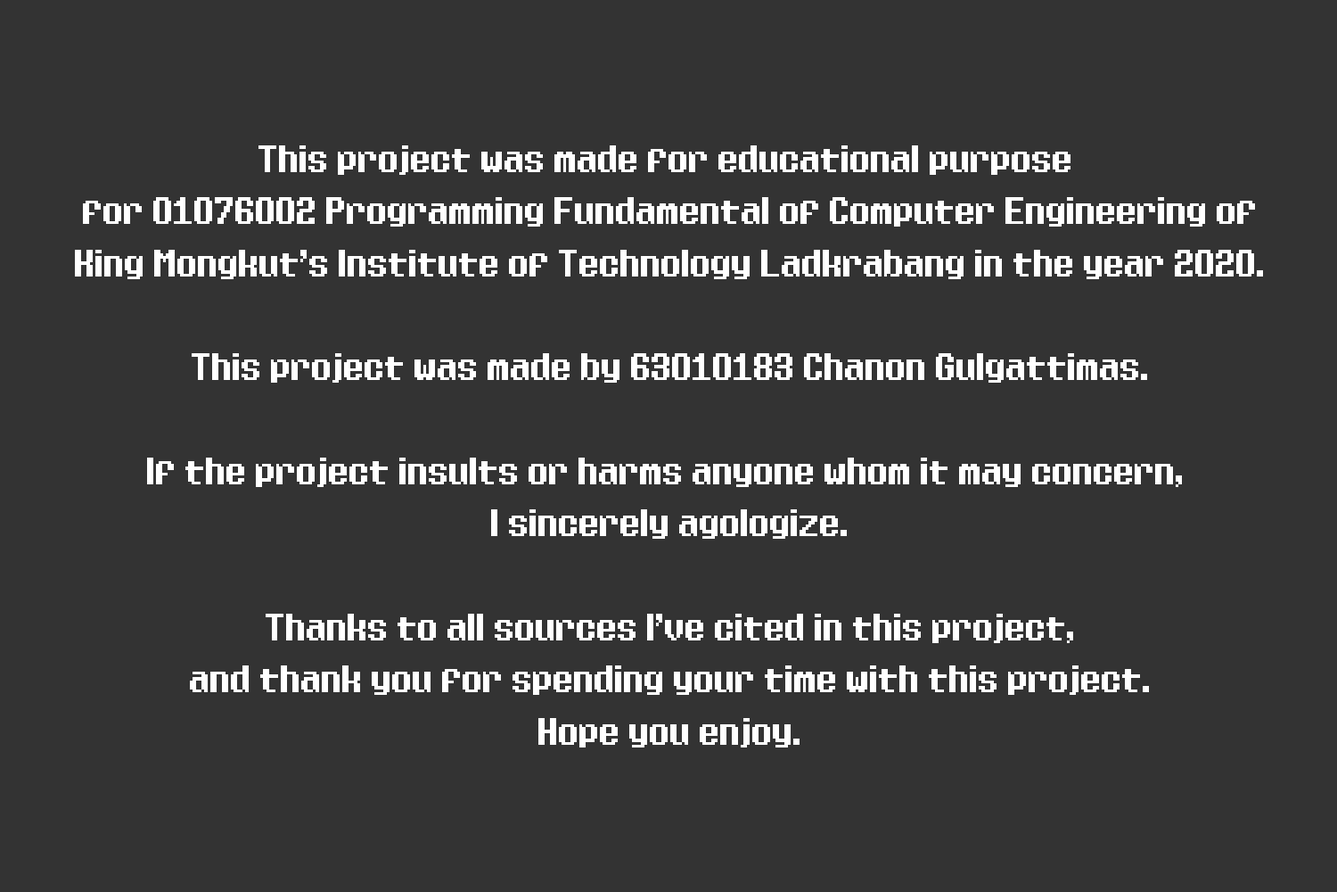
<style>
.page{position:relative;width:1337px;height:892px;background:#333333}
.page>*{position:absolute;margin:0}
.t1{font:29.7px/52px "Eight-Bit-Dragon";color:#ffffff}
</style>
<div class="page">
<p class="t1" style="left:75px;top:145px;width:1188px;height:602px;text-align:center">This project was made for educational purpose <br>for 01076002 Programming Fundamental of Computer Engineering of<br>King Mongkut's Institute of Technology Ladkrabang in the year 2020.<br><br>This project was made by 63010183 Chanon Gulgattimas.<br><br>If the project insults or harms anyone whom it may concern, <br>I sincerely agologize.<br><br>Thanks to all sources I’ve cited in this project,<br>and thank you for spending your time with this project.<br>Hope you enjoy.</p>
</div>
